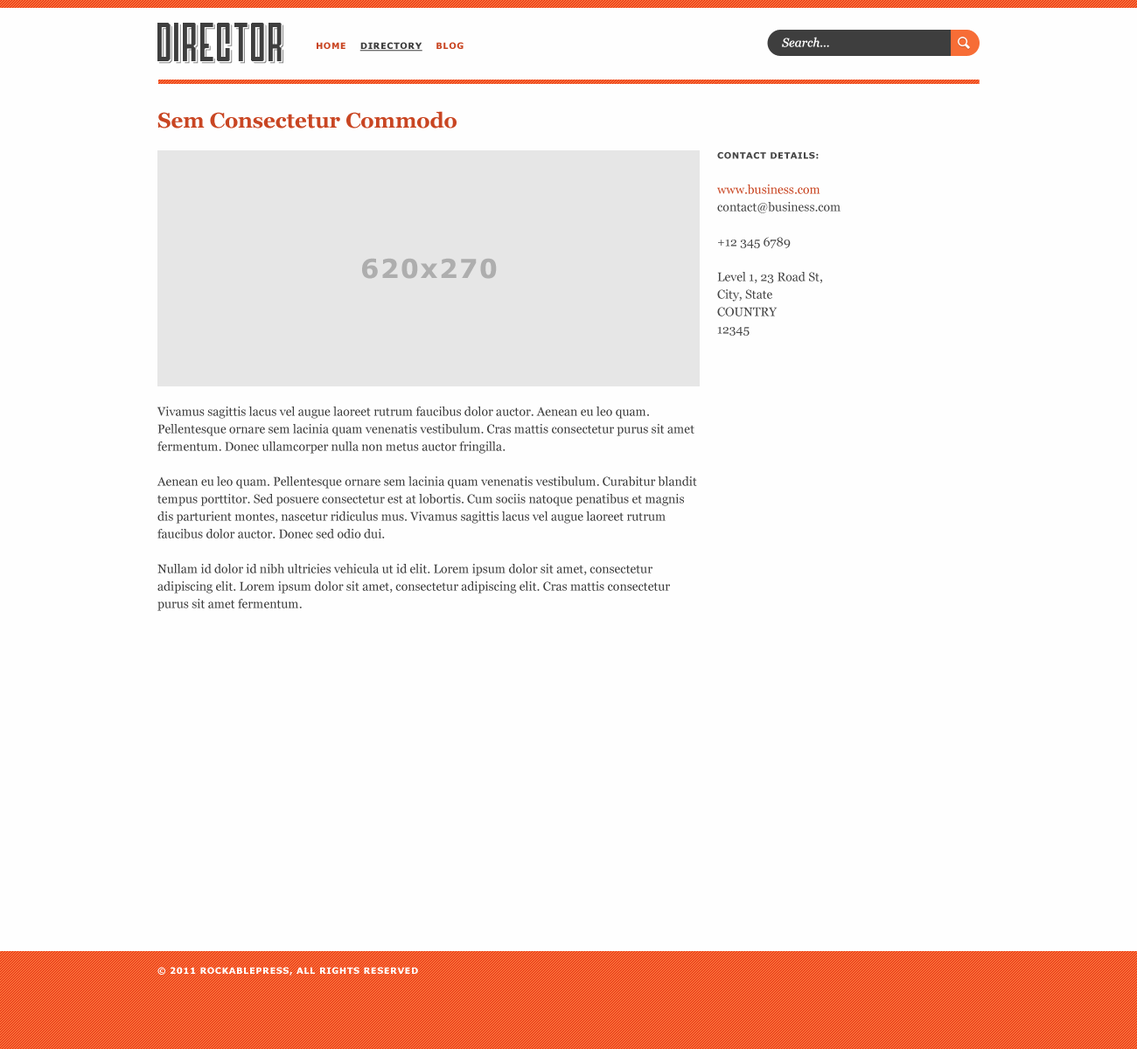
<style>
.page{position:relative;width:1137px;height:1049px;background:#fefefe}
.page>*{position:absolute;margin:0}
.t1{font:38.4px "Airship27";color:#3e3e3e}
.t2{font:38.4px "Airship27"}
.t3{font:8.7px "Verdana-Bold";letter-spacing:0.05em;color:#3e3e3e;text-decoration:underline}
.t4{font:8.7px "Verdana-Bold";letter-spacing:0.05em;color:#c94623}
.t5{font:12.2px "Georgia-Italic";color:#fefefe}
.t6{font:21px "Georgia-Bold";color:#c94623}
.t7{font:12.2px/17.5px "Georgia";color:#464646}
.t8{font:8.7px/16.6px "Verdana-Bold";letter-spacing:0.05em;color:#464646}
.t9{font:12.2px/17.5px "Georgia";color:#c94623}
.t10{font:26.2px "Verdana-Bold";letter-spacing:0.05em;color:#aeaeae}
.t11{font:12.2px/17.5px "Georgia";color:#3e3e3e}
.t12{font:8.7px "Verdana-Bold";letter-spacing:0.05em;color:#ffffff}
</style>
<div class="page">
<p class="t1" style="left:157px;top:23px;width:125px;height:38px">DirectOr</p>
<p class="t2" style="left:158px;top:24px;width:124px;height:39px">DirectOr</p>
<p class="t3" style="left:316px;top:42px;width:147px;height:10px"><span class="t4">HOME    </span>DIRECTORY<span class="t4">    BLOG</span></p>
<p class="t5" style="left:782px;top:37px;width:47px;height:10px">Search...</p>
<p class="t6" style="left:157px;top:111px;width:299px;height:18px">Sem Consectetur Commodo</p>
<p class="t7" style="left:717px;top:152px;width:123px;height:184px"><span class="t8">CONTACT DETAILS:<br><br></span><span class="t9">www.business.com<br></span>contact@business.com<br><br>+12 345 6789<br><br>Level 1, 23 Road St,<br>City, State<br>COUNTRY<br>12345</p>
<p class="t10" style="left:362px;top:258px;width:135px;height:21px">620x270</p>
<p class="t11" style="left:156px;top:407px;width:541px;height:204px">Vivamus sagittis lacus vel augue laoreet rutrum faucibus dolor auctor. Aenean eu leo quam. Pellentesque ornare sem lacinia quam venenatis vestibulum. Cras mattis consectetur purus sit amet fermentum. Donec ullamcorper nulla non metus auctor fringilla.<br><br>Aenean eu leo quam. Pellentesque ornare sem lacinia quam venenatis vestibulum. Curabitur blandit tempus porttitor. Sed posuere consectetur est at lobortis. Cum sociis natoque penatibus et magnis dis parturient montes, nascetur ridiculus mus. Vivamus sagittis lacus vel augue laoreet rutrum faucibus dolor auctor. Donec sed odio dui.<br><br>Nullam id dolor id nibh ultricies vehicula ut id elit. Lorem ipsum dolor sit amet, consectetur adipiscing elit. Lorem ipsum dolor sit amet, consectetur adipiscing elit. Cras mattis consectetur purus sit amet fermentum.</p>
<p class="t12" style="left:157px;top:967px;width:261px;height:9px">© 2011 ROCKABLEPRESS, ALL RIGHTS RESERVED</p>
</div>
